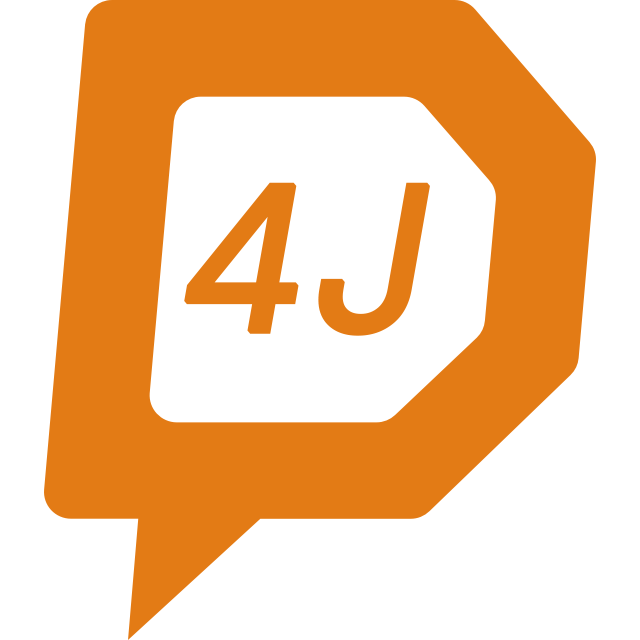
<style>
.page{position:relative;width:640px;height:640px;background:#ffffff}
.page>*{position:absolute;margin:0}
.t1{font:200px "Inter-Regular";color:#e37b15;font-weight:bold;font-style:italic}
</style>
<div class="page">
<p class="t1" style="left:184px;top:182px;width:246px;height:154px">4J</p>
</div>
